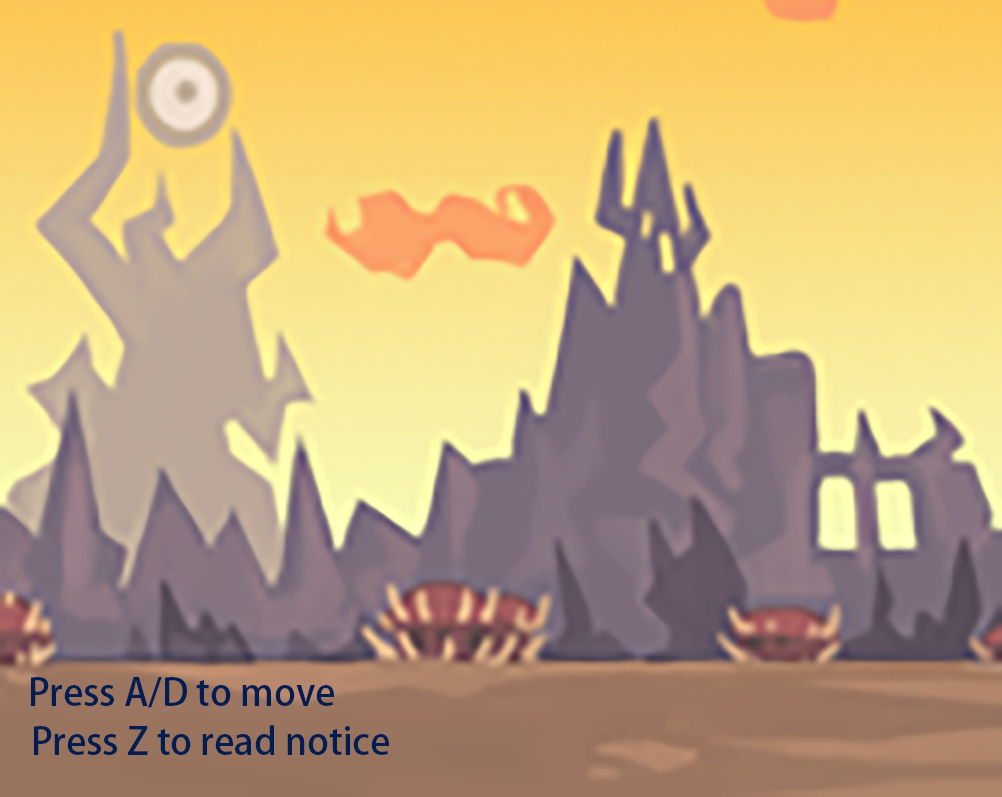
<style>
.page{position:relative;width:1002px;height:797px}
.page>*{position:absolute;margin:0}
.t1{font:37.1px "AdobeHeitiStd-Regular";color:#021d52}
</style>
<div class="page">
<p class="t1" style="left:31px;top:677px;width:303px;height:31px">Press A/D to move</p>
<p class="t1" style="left:34px;top:725px;width:355px;height:30px">Press Z to read notice</p>
</div>
